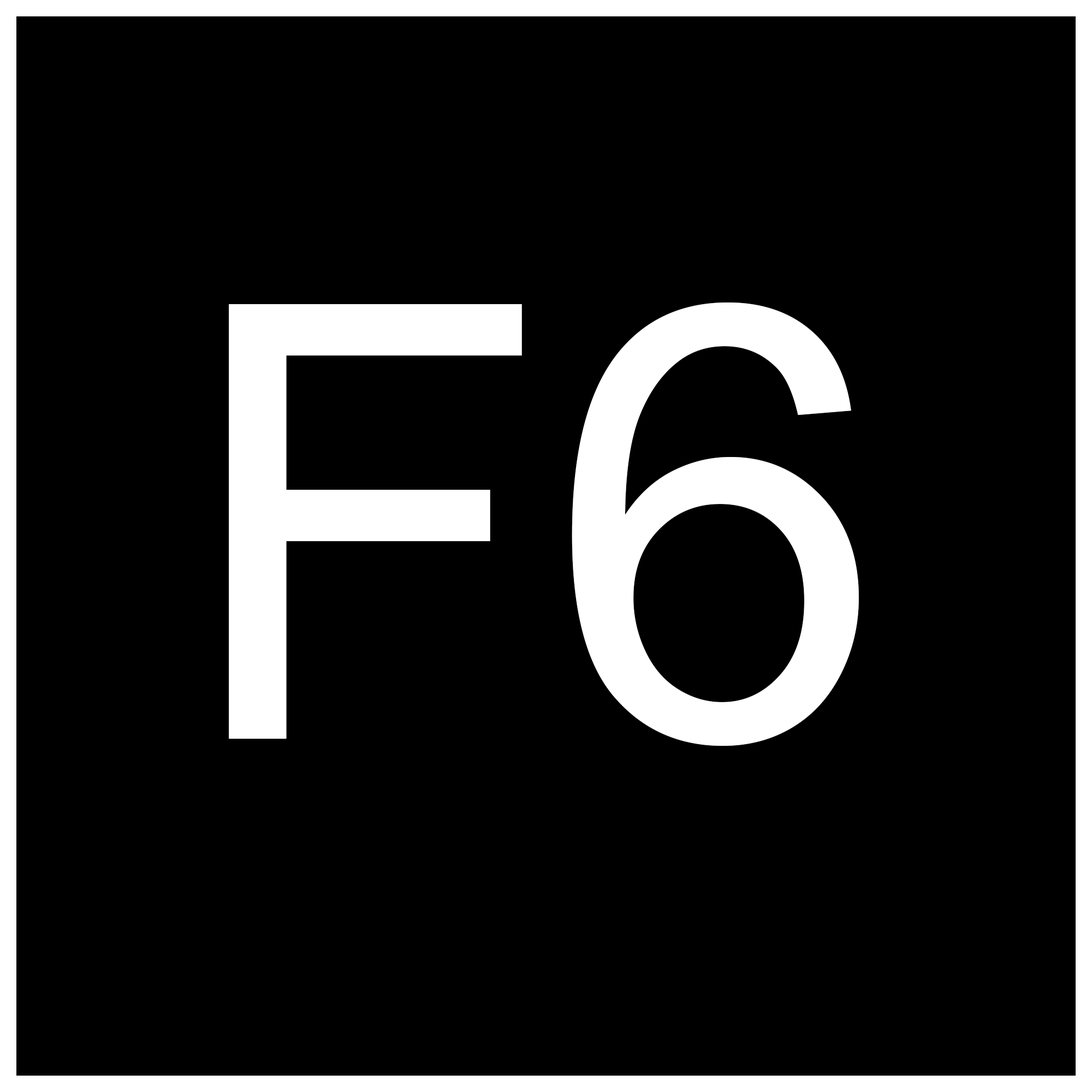
<style>
.page{position:relative;width:1092px;height:1092px;background:#000000}
.page>*{position:absolute;margin:0}
.t1{font:606.7px "ArialMT";color:#ffffff}
</style>
<div class="page">
<p class="t1" style="left:229px;top:302px;width:630px;height:444px">F6</p>
</div>
